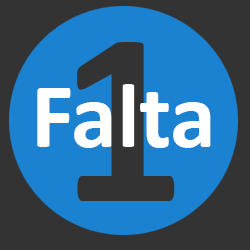
<style>
.page{position:relative;width:250px;height:250px;background:#1b82d1}
.page>*{position:absolute;margin:0}
.t1{font:92.6px "Calibri-Bold";color:#ffffff}
</style>
<div class="page">
<p class="t1" style="left:37px;top:84px;width:174px;height:64px">Falta</p>
</div>
